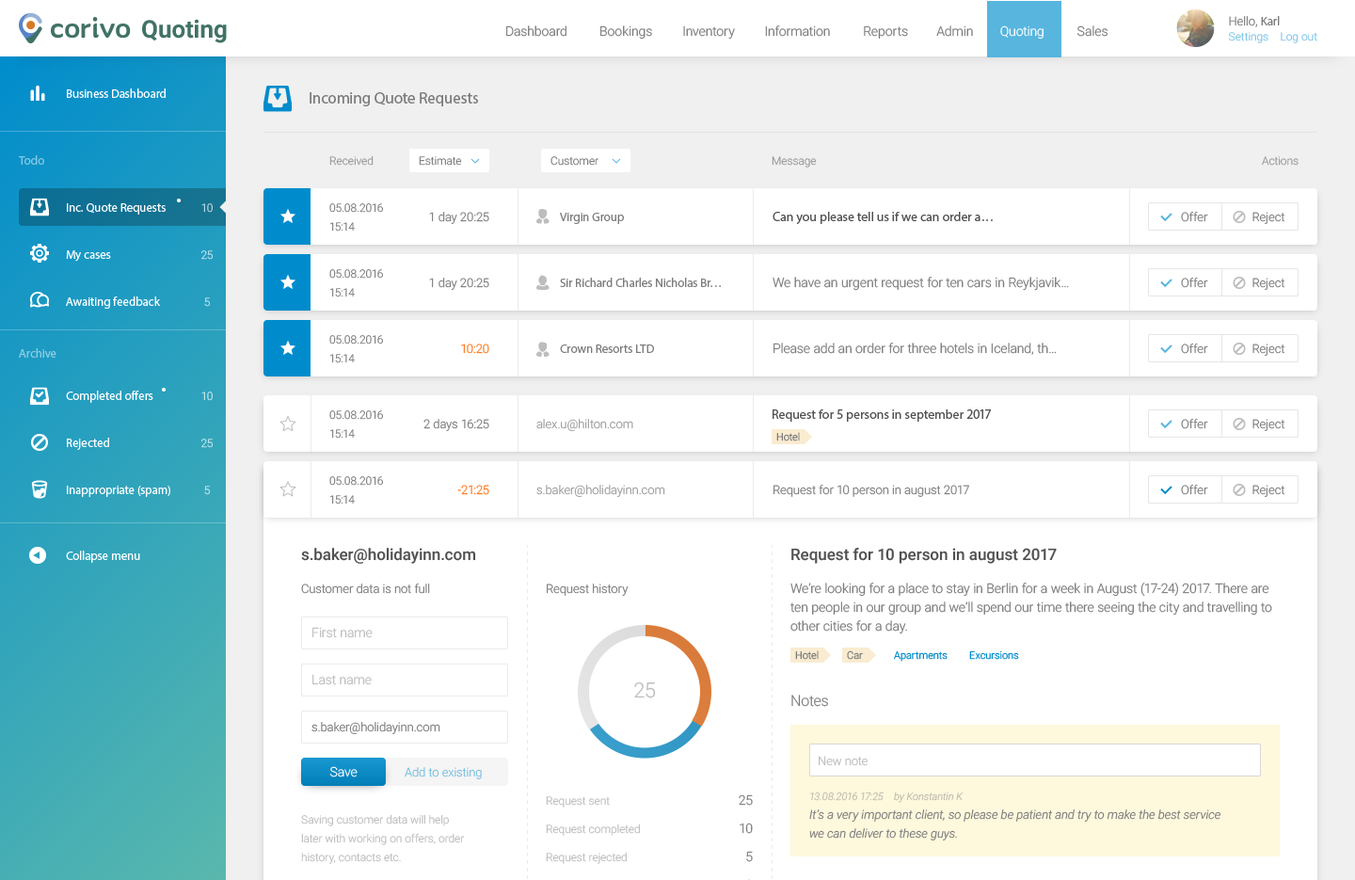
<style>
.page{position:relative;width:1355px;height:880px;background:#ffffff}
.page>*{position:absolute;margin:0}
.t1{font:12.2px "Roboto-Light";color:#7b7b7b}
.t2{font:12.2px "Roboto-Regular";color:#7b7b7b}
.t3{font:24.5px "Roboto-Bold";color:#417266}
.t4{font:13.2px "Roboto-Light";color:#7b7b7b}
.t5{font:13.2px "Roboto-Light";color:#ffffff}
.t6{font:11.3px "Roboto-Light"}
.t7{font:12.2px "Roboto-Regular";color:#ffffff}
.t8{font:16px "Roboto-Regular";color:#7b7b7b}
.t9{font:12.2px "Roboto-Regular";color:#86c9e4}
.t10{font:11.3px "Roboto-Light";color:#7b7b7b}
.t11{font:11.3px/18.8px "Roboto-Light";color:#7b7b7b}
.t12{font:13.2px "Roboto-Regular";color:#505050}
.t13{font:12.2px "Roboto-Regular";color:#8ecde1}
.t14{font:12.2px "Roboto-Light";color:#ff7415}
.t15{font:12.2px "Roboto-Light"}
.t16{font:10.4px "Roboto-Light";color:#7b7b7b}
.t17{font:12.2px "Roboto-Light";color:#9c9c9c}
.t18{font:16px "Roboto-Medium";color:#505050}
.t19{font:13.2px/18.8px "Roboto-Light";color:#7b7b7b}
.t20{font:13.2px "Roboto-Light";color:#bdbdbd}
.t21{font:10.4px "Roboto-Light";color:#008ccc}
.t22{font:20.7px "Roboto-Light";color:#bdbdbd}
.t23{font:15.1px "Roboto-Light";color:#7b7b7b}
.t24{font:12.2px "Roboto-Light";color:#7ac0e0}
.t25{font:10.4px "Roboto-LightItalic"}
.t26{font:12.2px/18.8px "Roboto-LightItalic";color:#7b7b7b}
.t27{font:11.3px/18.8px "Roboto-Light";color:#bdbdbd}
</style>
<div class="page">
<p class="t1" style="left:1229px;top:16px;width:51px;height:11px">Hello, <span class="t2">Karl</span></p>
<p class="t3" style="left:142px;top:19px;width:85px;height:24px">Quoting</p>
<p class="t4" style="left:506px;top:25px;width:61px;height:12px">Dashboard</p>
<p class="t4" style="left:600px;top:25px;width:52px;height:15px">Bookings</p>
<p class="t4" style="left:683px;top:25px;width:52px;height:15px">Inventory</p>
<p class="t4" style="left:765px;top:25px;width:65px;height:12px">Information</p>
<p class="t4" style="left:864px;top:25px;width:44px;height:14px">Reports</p>
<p class="t4" style="left:936px;top:25px;width:37px;height:12px">Admin</p>
<p class="t5" style="left:1000px;top:25px;width:44px;height:15px">Quoting</p>
<p class="t4" style="left:1078px;top:25px;width:30px;height:12px">Sales</p>
<p class="t6" style="left:1228px;top:32px;width:41px;height:11px">Settings</p>
<p class="t6" style="left:1281px;top:32px;width:37px;height:11px">Log out</p>
<p class="t7" style="left:67px;top:88px;width:99px;height:10px">Business Dashboard</p>
<p class="t8" style="left:310px;top:92px;width:168px;height:14px">Incoming Quote Requests</p>
<p class="t9" style="left:19px;top:155px;width:25px;height:10px">Todo</p>
<p class="t6" style="left:329px;top:155px;width:45px;height:11px">Received</p>
<p class="t10" style="left:419px;top:156px;width:43px;height:10px">Estimate</p>
<p class="t10" style="left:551px;top:156px;width:48px;height:10px">Customer</p>
<p class="t6" style="left:772px;top:156px;width:45px;height:12px">Message</p>
<p class="t6" style="left:1262px;top:156px;width:37px;height:10px">Actions</p>
<p class="t7" style="left:67px;top:203px;width:99px;height:12px">Inc. Quote Requests</p>
<p class="t6" style="left:201px;top:203px;width:12px;height:10px">10</p>
<p class="t11" style="left:329px;top:203px;width:54px;height:29px">05.08.2016<br>15:14</p>
<p class="t1" style="left:429px;top:212px;width:60px;height:12px">1 day 20:25</p>
<p class="t2" style="left:560px;top:213px;width:64px;height:11px">Virgin Group</p>
<p class="t12" style="left:773px;top:212px;width:220px;height:13px">Can you please tell us if we can order a…</p>
<p class="t1" style="left:1181px;top:211px;width:27px;height:11px">Offer</p>
<p class="t1" style="left:1253px;top:212px;width:33px;height:12px">Reject</p>
<p class="t7" style="left:66px;top:250px;width:45px;height:12px">My cases</p>
<p class="t6" style="left:201px;top:250px;width:13px;height:10px">25</p>
<p class="t11" style="left:329px;top:269px;width:54px;height:28px">05.08.2016<br>15:14</p>
<p class="t1" style="left:429px;top:278px;width:60px;height:12px">1 day 20:25</p>
<p class="t2" style="left:560px;top:278px;width:161px;height:9px">Sir Richard Charles Nicholas Br…</p>
<p class="t4" style="left:773px;top:277px;width:296px;height:14px">We have an urgent request for ten cars in Reykjavik…</p>
<p class="t1" style="left:1181px;top:277px;width:27px;height:11px">Offer</p>
<p class="t1" style="left:1253px;top:278px;width:33px;height:12px">Reject</p>
<p class="t7" style="left:66px;top:296px;width:94px;height:13px">Awaiting feedback</p>
<p class="t6" style="left:204px;top:297px;width:7px;height:10px">5</p>
<p class="t11" style="left:329px;top:335px;width:54px;height:28px">05.08.2016<br>15:14</p>
<p class="t13" style="left:19px;top:348px;width:37px;height:10px">Archive</p>
<p class="t14" style="left:461px;top:343px;width:28px;height:11px">10:20</p>
<p class="t2" style="left:560px;top:344px;width:94px;height:9px">Crown Resorts LTD</p>
<p class="t4" style="left:774px;top:343px;width:283px;height:12px">Please add an order for three hotels in Iceland, th…</p>
<p class="t1" style="left:1181px;top:343px;width:27px;height:11px">Offer</p>
<p class="t1" style="left:1253px;top:343px;width:33px;height:13px">Reject</p>
<p class="t7" style="left:66px;top:391px;width:87px;height:12px">Completed offers</p>
<p class="t6" style="left:201px;top:391px;width:12px;height:10px">10</p>
<p class="t11" style="left:329px;top:410px;width:54px;height:29px">05.08.2016<br>15:14</p>
<p class="t12" style="left:773px;top:409px;width:218px;height:13px">Request for 5 persons in september 2017</p>
<p class="t1" style="left:423px;top:419px;width:66px;height:12px">2 days 16:25</p>
<p class="t15" style="left:536px;top:419px;width:97px;height:12px">alex.u@hilton.com</p>
<p class="t1" style="left:1181px;top:418px;width:27px;height:11px">Offer</p>
<p class="t1" style="left:1253px;top:419px;width:33px;height:12px">Reject</p>
<p class="t7" style="left:67px;top:438px;width:42px;height:12px">Rejected</p>
<p class="t16" style="left:776px;top:432px;width:24px;height:9px">Hotel</p>
<p class="t6" style="left:201px;top:439px;width:13px;height:9px">25</p>
<p class="t7" style="left:67px;top:486px;width:103px;height:11px">Inappropriate (spam)</p>
<p class="t6" style="left:204px;top:486px;width:7px;height:9px">5</p>
<p class="t11" style="left:329px;top:476px;width:54px;height:28px">05.08.2016<br>15:14</p>
<p class="t14" style="left:457px;top:485px;width:32px;height:10px">-21:25</p>
<p class="t17" style="left:536px;top:485px;width:129px;height:12px">s.baker@holidayinn.com</p>
<p class="t1" style="left:774px;top:484px;width:195px;height:13px">Request for 10 person in august 2017</p>
<p class="t1" style="left:1181px;top:484px;width:27px;height:11px">Offer</p>
<p class="t1" style="left:1253px;top:485px;width:33px;height:12px">Reject</p>
<p class="t7" style="left:66px;top:551px;width:74px;height:12px">Collapse menu</p>
<p class="t18" style="left:301px;top:548px;width:175px;height:16px">s.baker@holidayinn.com</p>
<p class="t18" style="left:791px;top:547px;width:266px;height:17px">Request for 10 person in august 2017</p>
<p class="t19" style="left:791px;top:582px;width:481px;height:52px">We’re looking for a place to stay in Berlin for a week in August (17-24) 2017. There are ten people in our group and we’ll spend our time there seeing the city and travelling to other cities for a day.</p>
<p class="t1" style="left:301px;top:583px;width:129px;height:11px">Customer data is not full</p>
<p class="t1" style="left:547px;top:583px;width:82px;height:13px">Request history</p>
<p class="t20" style="left:312px;top:627px;width:61px;height:11px">First name</p>
<p class="t16" style="left:795px;top:650px;width:24px;height:10px">Hotel</p>
<p class="t16" style="left:847px;top:650px;width:16px;height:10px">Car</p>
<p class="t21" style="left:894px;top:651px;width:54px;height:11px">Apartments</p>
<p class="t21" style="left:969px;top:650px;width:50px;height:10px">Excursions</p>
<p class="t20" style="left:312px;top:674px;width:60px;height:11px">Last name</p>
<p class="t22" style="left:634px;top:682px;width:22px;height:16px">25</p>
<p class="t23" style="left:791px;top:695px;width:37px;height:12px">Notes</p>
<p class="t1" style="left:311px;top:722px;width:129px;height:12px">s.baker@holidayinn.com</p>
<p class="t15" style="left:819px;top:756px;width:49px;height:10px">New note</p>
<p class="t5" style="left:330px;top:766px;width:28px;height:11px">Save</p>
<p class="t24" style="left:405px;top:767px;width:77px;height:12px">Add to existing</p>
<p class="t6" style="left:546px;top:796px;width:64px;height:11px">Request sent</p>
<p class="t4" style="left:739px;top:794px;width:14px;height:12px">25</p>
<p class="t25" style="left:810px;top:791px;width:74px;height:10px">13.08.2016 17:25</p>
<p class="t25" style="left:894px;top:791px;width:70px;height:12px">by Konstantin K</p>
<p class="t26" style="left:809px;top:809px;width:412px;height:31px">It’s a very important client, so please be patient and try to make the best service<br>we can deliver to these guys.</p>
<p class="t27" style="left:301px;top:814px;width:164px;height:50px">Saving customer data will help<br>later with working on offers, order<br>history, contacts etc.</p>
<p class="t6" style="left:546px;top:823px;width:94px;height:13px">Request completed</p>
<p class="t4" style="left:740px;top:823px;width:13px;height:11px">10</p>
<p class="t6" style="left:546px;top:852px;width:81px;height:12px">Request rejected</p>
<p class="t4" style="left:746px;top:851px;width:7px;height:11px">5</p>
</div>
